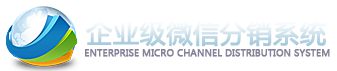
<style>
.page{position:relative;width:337px;height:71px;background:#ffffff}
.page>*{position:absolute;margin:0}
.t1{font:26px "MicrosoftYaHei";text-transform:uppercase;font-weight:bold}
.t2{font:9px "MicrosoftYaHei";color:#848298;text-transform:uppercase;font-weight:bold}
</style>
<div class="page">
<p class="t1" style="left:86px;top:19px;width:240px;height:28px">企业级微信分销系统</p>
<p class="t2" style="left:85px;top:49px;width:245px;height:8px">Enterprise micro channel distribution system</p>
</div>
